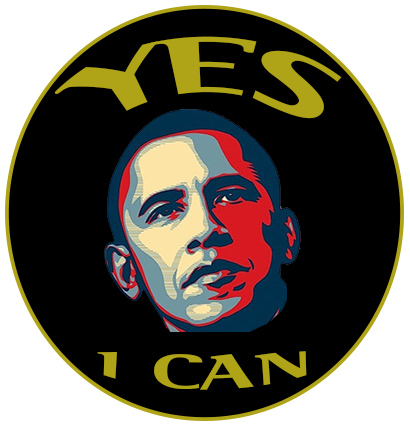
<style>
.page{position:relative;width:410px;height:425px;background:#000000}
.page>*{position:absolute;margin:0}
.t1{font:84.8px "SerifBlack";letter-spacing:0.1em;color:#afa318;scale:1.41 1}
.t2{font:34.1px "SerifBlack";letter-spacing:0.1em;color:#afa318;scale:2.51 1}
</style>
<div class="page">
<p class="t1" style="left:54px;top:36px;width:288px;height:83px">YES</p>
<p class="t2" style="left:97px;top:351px;width:210px;height:39px">I CAN</p>
</div>
